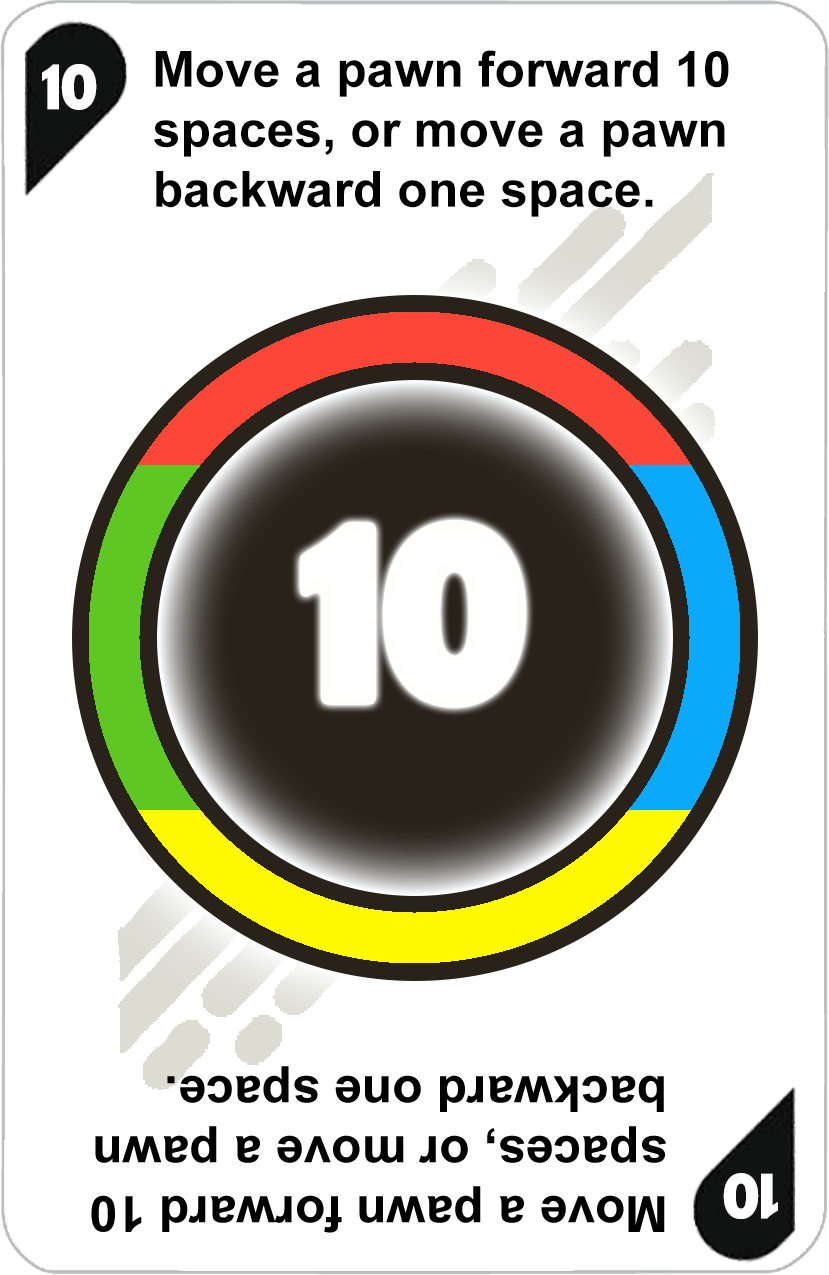
<style>
.page{position:relative;width:829px;height:1275px;background:#ffffff}
.page>*{position:absolute;margin:0}
.t1{font:50px "Arial-BoldMT";color:#000000}
.t2{font:72px "AdGothic-Regular";color:#ffffff}
.t3{font:277px "AdGothic-Regular";color:#ffffff}
</style>
<div class="page">
<p class="t1" style="left:154px;top:50px;width:575px;height:167px">Move a pawn forward 10 <br>spaces, or move a pawn <br>backward one space.</p>
<p class="t2" style="left:42px;top:64px;width:55px;height:46px">10</p>
<p class="t3" style="left:305px;top:527px;width:66px;height:173px">1</p>
<p class="t3" style="left:388px;top:525px;width:133px;height:178px">0</p>
</div>
